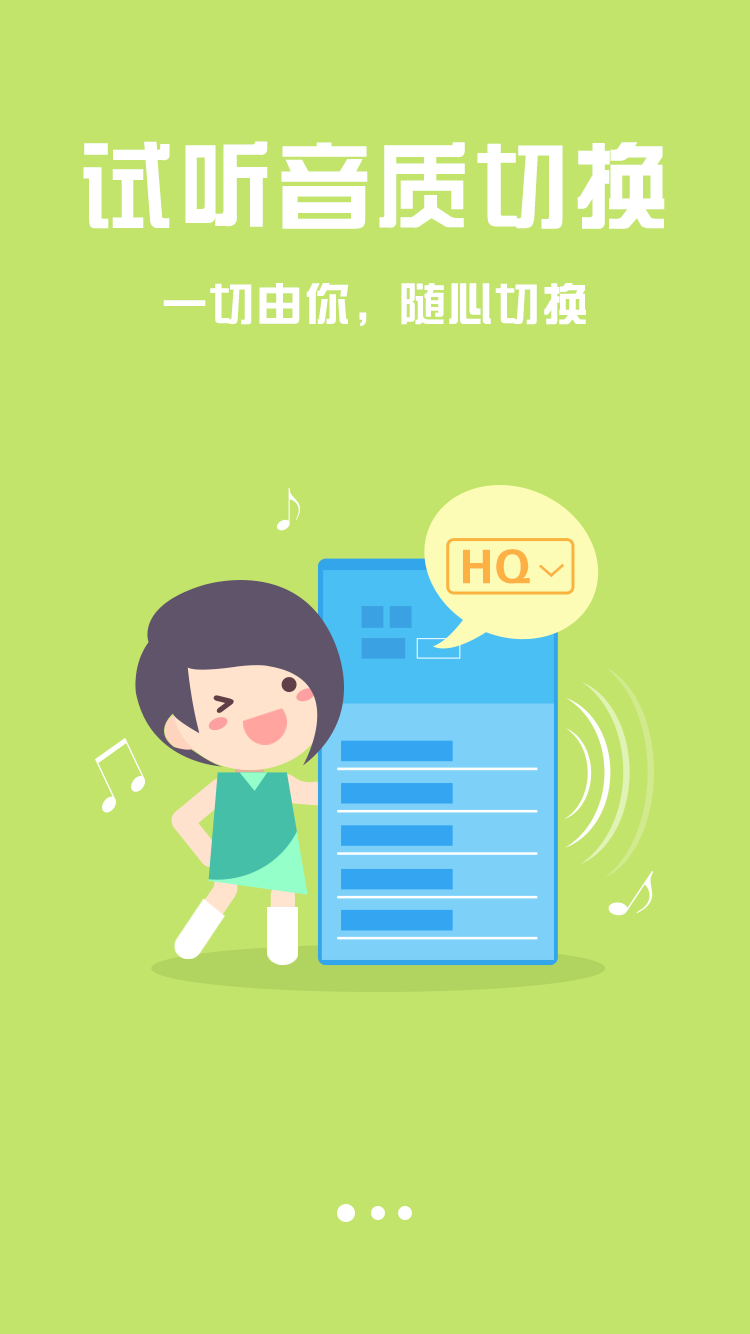
<style>
.page{position:relative;width:750px;height:1334px;background:#c2e46b}
.page>*{position:absolute;margin:0}
.t1{font:96px "FZZYJW--GB1-0";letter-spacing:0.03em;color:#ffffff}
.t2{font:45.7px "FZZYJW--GB1-0";letter-spacing:0.03em;color:#ffffff}
.t3{font:46.2px "FZZYJW--GB1-0";letter-spacing:0.03em;color:#fdb245}
</style>
<div class="page">
<p class="t1" style="left:83px;top:141px;width:582px;height:88px">试听音质切换</p>
<p class="t2" style="left:163px;top:283px;width:423px;height:43px">一切由你，随心切换</p>
<p class="t3" style="left:463px;top:549px;width:67px;height:35px">HQ</p>
</div>
